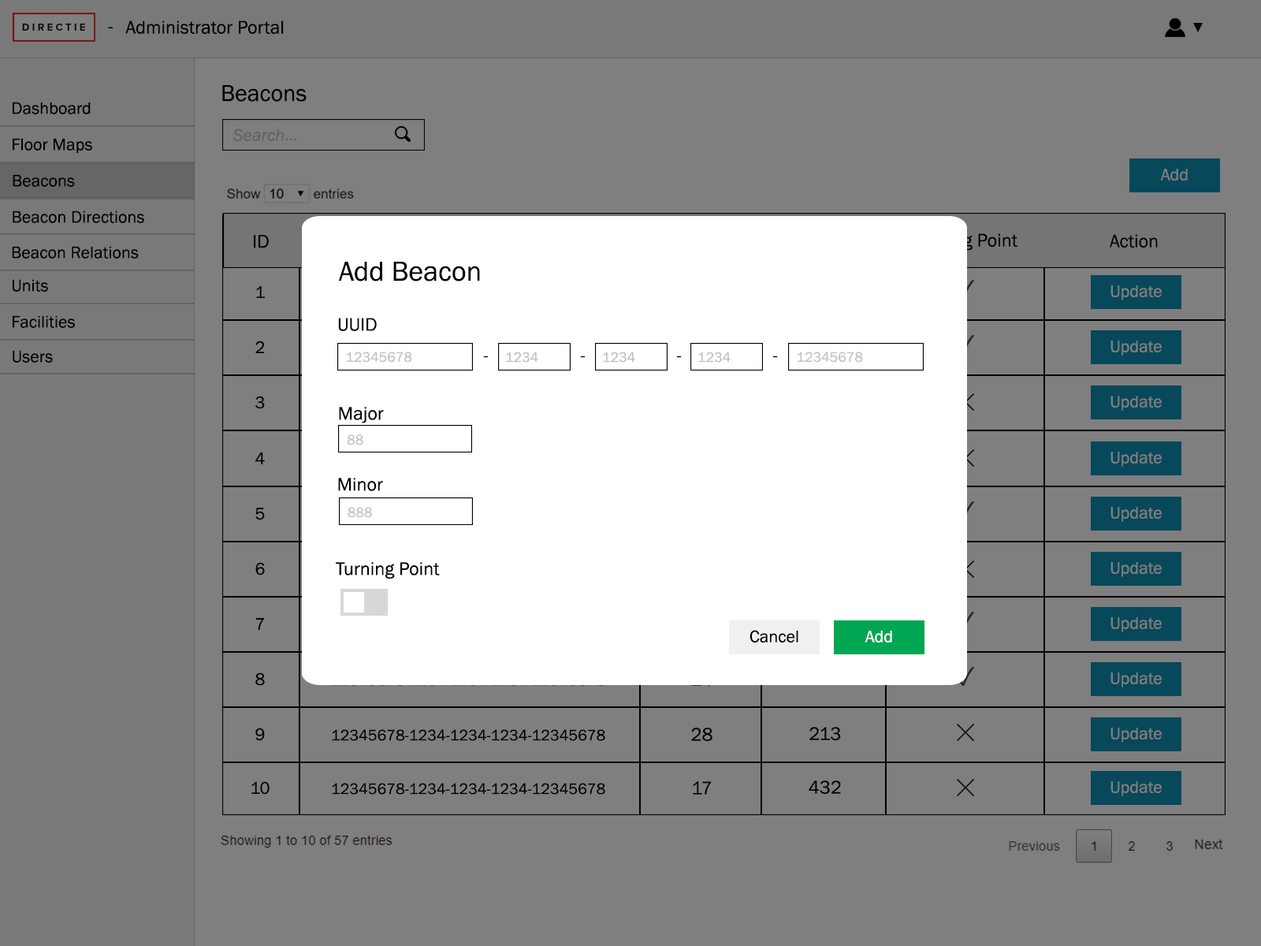
<style>
.page{position:relative;width:1261px;height:946px;background:#7f7f7f}
.page>*{position:absolute;margin:0}
.t1{font:18.9px "FranklinGothic-Book";color:#000000}
.t2{font:23.6px "FranklinGothic-Book";color:#000000}
.t3{font:17.3px "FranklinGothic-Book";color:#000000}
.t4{font:17.3px "FranklinGothic-Book";color:#7f7f7f}
.t5{font:28.4px "FranklinGothic-Book";color:#000000}
.t6{font:14.2px "FranklinGothic-Book";color:#c2c2c2}
.t7{font:17.3px "FranklinGothic-Book";color:#010101}
.t8{font:17.3px "FranklinGothic-Book";color:#fefefe}
.t9{font:15.8px "FranklinGothic-Book";color:#000000}
</style>
<div class="page">
<p class="t1" style="left:108px;top:27px;width:5px;height:1px">-</p>
<p class="t1" style="left:125px;top:20px;width:159px;height:14px">Administrator Portal</p>
<p class="t2" style="left:222px;top:85px;width:85px;height:17px">Beacons</p>
<p class="t3" style="left:13px;top:102px;width:78px;height:12px">Dashboard</p>
<p class="t3" style="left:13px;top:138px;width:79px;height:16px">Floor Maps</p>
<p class="t4" style="left:1160px;top:169px;width:28px;height:11px">Add</p>
<p class="t3" style="left:13px;top:174px;width:62px;height:13px">Beacons</p>
<p class="t3" style="left:13px;top:210px;width:131px;height:13px">Beacon Directions</p>
<p class="t3" style="left:12px;top:246px;width:127px;height:12px">Beacon Relations</p>
<p class="t1" style="left:254px;top:235px;width:15px;height:13px">ID</p>
<p class="t1" style="left:1109px;top:234px;width:49px;height:14px">Action</p>
<p class="t5" style="left:339px;top:262px;width:141px;height:19px">Add Beacon</p>
<p class="t3" style="left:13px;top:279px;width:35px;height:13px">Units</p>
<p class="t3" style="left:256px;top:285px;width:9px;height:13px">1</p>
<p class="t4" style="left:1110px;top:285px;width:52px;height:15px">Update</p>
<p class="t3" style="left:13px;top:315px;width:62px;height:13px">Facilities</p>
<p class="t1" style="left:338px;top:318px;width:39px;height:13px">UUID</p>
<p class="t3" style="left:255px;top:340px;width:10px;height:13px">2</p>
<p class="t4" style="left:1110px;top:340px;width:52px;height:15px">Update</p>
<p class="t3" style="left:13px;top:350px;width:40px;height:13px">Users</p>
<p class="t6" style="left:347px;top:351px;width:65px;height:12px">12345678</p>
<p class="t6" style="left:506px;top:351px;width:32px;height:12px">1234</p>
<p class="t6" style="left:603px;top:351px;width:32px;height:12px">1234</p>
<p class="t6" style="left:698px;top:351px;width:33px;height:12px">1234</p>
<p class="t6" style="left:798px;top:351px;width:65px;height:12px">12345678</p>
<p class="t1" style="left:483px;top:355px;width:6px;height:3px">-</p>
<p class="t1" style="left:580px;top:355px;width:6px;height:3px">-</p>
<p class="t1" style="left:676px;top:355px;width:6px;height:3px">-</p>
<p class="t1" style="left:772px;top:355px;width:6px;height:3px">-</p>
<p class="t3" style="left:255px;top:396px;width:10px;height:13px">3</p>
<p class="t4" style="left:1110px;top:396px;width:52px;height:15px">Update</p>
<p class="t1" style="left:339px;top:407px;width:45px;height:16px">Major</p>
<p class="t6" style="left:347px;top:434px;width:16px;height:11px">88</p>
<p class="t3" style="left:255px;top:452px;width:10px;height:12px">4</p>
<p class="t4" style="left:1110px;top:452px;width:52px;height:15px">Update</p>
<p class="t1" style="left:338px;top:478px;width:45px;height:13px">Minor</p>
<p class="t3" style="left:255px;top:508px;width:10px;height:12px">5</p>
<p class="t6" style="left:348px;top:507px;width:24px;height:11px">888</p>
<p class="t4" style="left:1110px;top:507px;width:52px;height:15px">Update</p>
<p class="t3" style="left:255px;top:562px;width:10px;height:13px">6</p>
<p class="t1" style="left:336px;top:562px;width:104px;height:16px">Turning Point</p>
<p class="t4" style="left:1110px;top:562px;width:52px;height:15px">Update</p>
<p class="t3" style="left:256px;top:618px;width:8px;height:12px">7</p>
<p class="t4" style="left:1110px;top:617px;width:52px;height:15px">Update</p>
<p class="t7" style="left:749px;top:630px;width:49px;height:12px">Cancel</p>
<p class="t8" style="left:865px;top:630px;width:27px;height:12px">Add</p>
<p class="t3" style="left:255px;top:672px;width:10px;height:14px">8</p>
<p class="t4" style="left:1110px;top:672px;width:52px;height:15px">Update</p>
<p class="t3" style="left:255px;top:727px;width:10px;height:14px">9</p>
<p class="t9" style="left:332px;top:729px;width:273px;height:12px">12345678-1234-1234-1234-12345678</p>
<p class="t1" style="left:691px;top:727px;width:21px;height:14px">28</p>
<p class="t1" style="left:809px;top:727px;width:32px;height:13px">213</p>
<p class="t4" style="left:1110px;top:727px;width:52px;height:15px">Update</p>
<p class="t3" style="left:251px;top:781px;width:19px;height:13px">10</p>
<p class="t9" style="left:332px;top:783px;width:273px;height:11px">12345678-1234-1234-1234-12345678</p>
<p class="t1" style="left:693px;top:781px;width:19px;height:13px">17</p>
<p class="t1" style="left:809px;top:780px;width:32px;height:14px">432</p>
<p class="t4" style="left:1110px;top:781px;width:52px;height:15px">Update</p>
</div>
